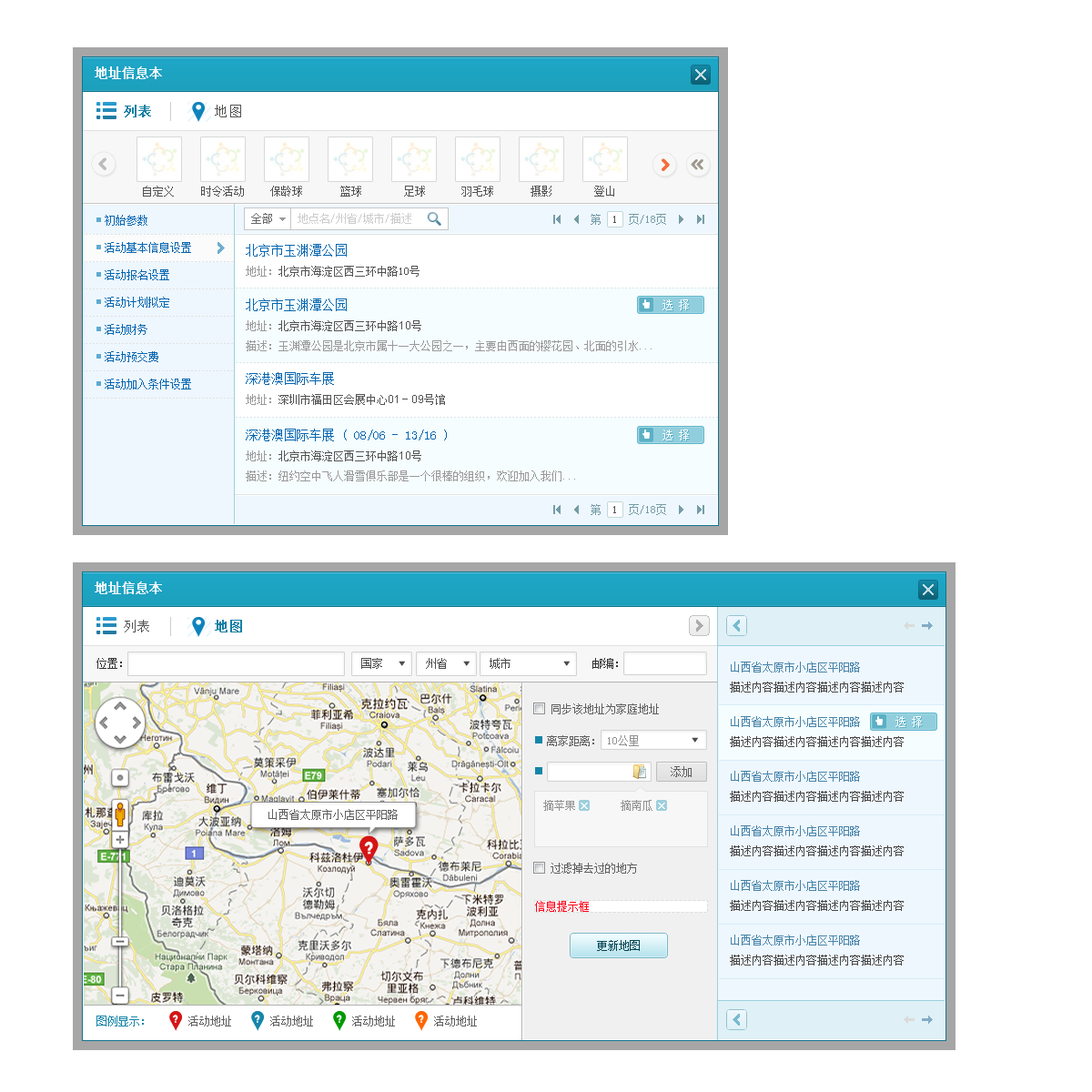
<style>
.page{position:relative;width:1092px;height:1092px;background:#ffffff}
.page>*{position:absolute;margin:0}
.t1{font:12.7px "SimSun";color:#eef7fe;font-weight:bold}
.t2{font:13.4px "SimSun";letter-spacing:0.05em;color:#147fa5;font-weight:bold}
.t3{font:13.4px "SimSun";letter-spacing:0.05em;color:#525252}
.t4{font:10.9px "SimSun";color:#525252}
.t5{font:10.9px/27.3px "SimSun";color:#0666b0}
.t6{font:10.9px "SimSun";color:#666666}
.t7{font:10.9px "SimSun";color:#cccccc}
.t8{font:10.9px "SimSun";color:#759ca7}
.t9{font:10.9px "SimSun";color:#555555}
.t10{font:12.7px "SimSun";color:#0666b0}
.t11{font:10.9px "SimSun";color:#999999}
.t12{font:10.9px "ArialMT";color:#525252}
.t13{font:10.9px "SimSun";color:#4683a9}
.t14{font:10.9px "SimSun";color:#464646}
.t15{font:10.9px "SimSun";color:#606060}
.t16{font:10.9px "SimSun";color:#1585a9}
</style>
<div class="page">
<p class="t1" style="left:95px;top:66px;width:67px;height:13px">地址信息本</p>
<p class="t2" style="left:124px;top:105px;width:27px;height:12px">列表</p>
<p class="t3" style="left:215px;top:105px;width:26px;height:12px">地图</p>
<p class="t4" style="left:143px;top:186px;width:31px;height:11px">自定义</p>
<p class="t4" style="left:201px;top:186px;width:43px;height:11px">时令活动</p>
<p class="t4" style="left:270px;top:186px;width:32px;height:11px">保龄球</p>
<p class="t4" style="left:340px;top:186px;width:21px;height:11px">篮球</p>
<p class="t4" style="left:404px;top:186px;width:21px;height:11px">足球</p>
<p class="t4" style="left:461px;top:186px;width:32px;height:11px">羽毛球</p>
<p class="t4" style="left:531px;top:186px;width:20px;height:11px">摄影</p>
<p class="t4" style="left:594px;top:186px;width:20px;height:11px">登山</p>
<p class="t5" style="left:105px;top:215px;width:86px;height:174px">初始参数<br>活动基本信息设置<br>活动报名设置<br>活动计划拟定<br>活动财务<br>活动预交费<br>活动加入条件设置</p>
<p class="t6" style="left:251px;top:213px;width:21px;height:11px">全部</p>
<p class="t7" style="left:298px;top:213px;width:113px;height:11px">地点名/州省/城市/描述</p>
<p class="t8" style="left:591px;top:214px;width:75px;height:11px">第 <span class="t9"> 1</span>  页/18页</p>
<p class="t10" style="left:246px;top:244px;width:101px;height:13px">北京市玉渊潭公园</p>
<p class="t4" style="left:246px;top:266px;width:174px;height:11px"><span class="t11">地址：</span>北京市海淀区西三环中路10号</p>
<p class="t10" style="left:246px;top:298px;width:101px;height:13px">北京市玉渊潭公园</p>
<p class="t4" style="left:246px;top:320px;width:175px;height:11px"><span class="t11">地址：</span>北京市海淀区西三环中路<span class="t12">10</span>号</p>
<p class="t11" style="left:246px;top:340px;width:406px;height:11px">描述：玉渊潭公园是北京市属十一大公园之一，主要由西面的樱花园、北面的引水...</p>
<p class="t10" style="left:246px;top:372px;width:88px;height:13px">深港澳国际车展</p>
<p class="t4" style="left:246px;top:394px;width:199px;height:11px"><span class="t11">地址：</span>深圳市福田区会展中心<span class="t12">01</span>－<span class="t12">09</span>号馆</p>
<p class="t10" style="left:246px;top:429px;width:201px;height:12px">深港澳国际车展 ( 08/06 - 13/16 )</p>
<p class="t4" style="left:246px;top:450px;width:175px;height:11px"><span class="t11">地址：</span>北京市海淀区西三环中路<span class="t12">10</span>号</p>
<p class="t11" style="left:246px;top:470px;width:329px;height:11px">描述：纽约空中飞人滑雪俱乐部是一个很棒的组织，欢迎加入我们...</p>
<p class="t8" style="left:591px;top:504px;width:75px;height:11px">第 <span class="t9"> 1</span>  页/18页</p>
<p class="t1" style="left:95px;top:581px;width:67px;height:13px">地址信息本</p>
<p class="t13" style="left:731px;top:662px;width:129px;height:10px">山西省太原市小店区平阳路</p>
<p class="t14" style="left:730px;top:682px;width:174px;height:11px">描述内容描述内容描述内容描述内容</p>
<p class="t13" style="left:731px;top:716px;width:129px;height:11px">山西省太原市小店区平阳路</p>
<p class="t14" style="left:730px;top:736px;width:174px;height:11px">描述内容描述内容描述内容描述内容</p>
<p class="t13" style="left:731px;top:771px;width:129px;height:11px">山西省太原市小店区平阳路</p>
<p class="t14" style="left:730px;top:791px;width:174px;height:11px">描述内容描述内容描述内容描述内容</p>
<p class="t15" style="left:268px;top:809px;width:130px;height:11px">山西省太原市小店区平阳路</p>
<p class="t13" style="left:731px;top:825px;width:129px;height:11px">山西省太原市小店区平阳路</p>
<p class="t14" style="left:730px;top:845px;width:174px;height:11px">描述内容描述内容描述内容描述内容</p>
<p class="t13" style="left:731px;top:880px;width:129px;height:11px">山西省太原市小店区平阳路</p>
<p class="t14" style="left:730px;top:900px;width:174px;height:11px">描述内容描述内容描述内容描述内容</p>
<p class="t13" style="left:731px;top:935px;width:129px;height:10px">山西省太原市小店区平阳路</p>
<p class="t14" style="left:730px;top:955px;width:174px;height:10px">描述内容描述内容描述内容描述内容</p>
<p class="t16" style="left:96px;top:1016px;width:48px;height:10px">图例显示：</p>
<p class="t15" style="left:188px;top:1016px;width:43px;height:10px">活动地址</p>
<p class="t15" style="left:270px;top:1016px;width:43px;height:10px">活动地址</p>
<p class="t15" style="left:352px;top:1016px;width:43px;height:10px">活动地址</p>
<p class="t15" style="left:434px;top:1016px;width:43px;height:10px">活动地址</p>
</div>
